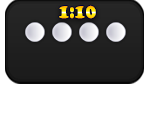
<style>
.page{position:relative;width:149px;height:120px;background:#ffffff}
.page>*{position:absolute;margin:0}
.t1{font:21.6px "UTM-Cooper-Black";scale:0.83 1}
</style>
<div class="page">
<p class="t1" style="left:59px;top:5px;width:37px;height:14px">1:10</p>
</div>
